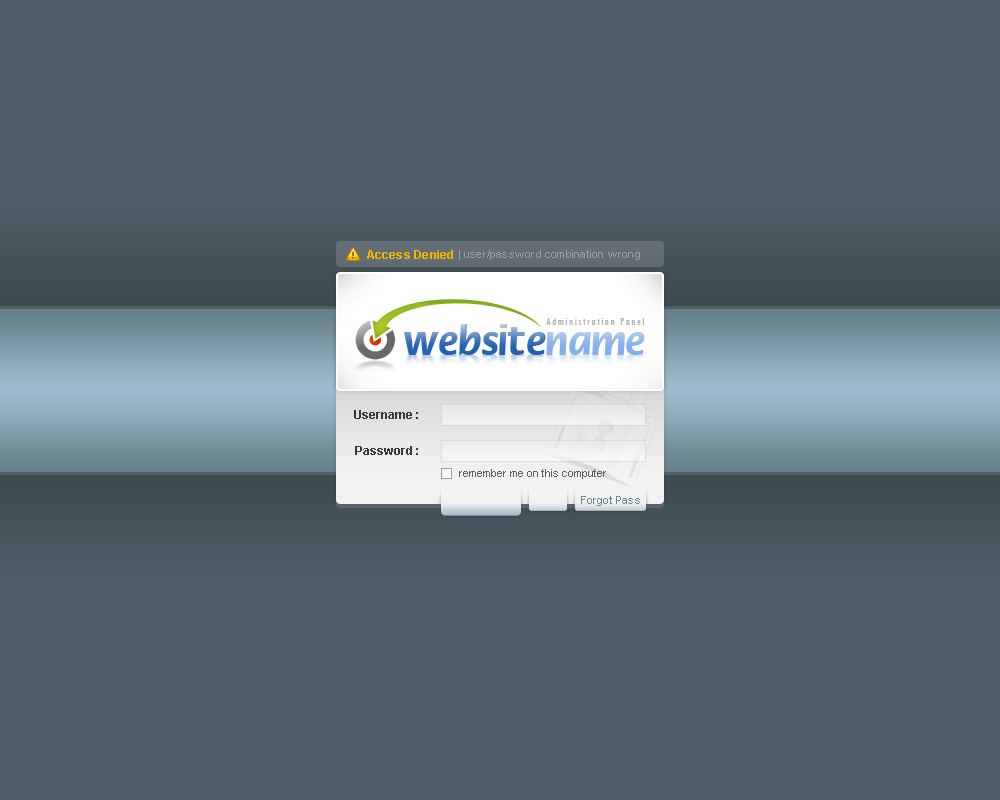
<style>
.page{position:relative;width:1000px;height:800px;background:#4f5e67}
.page>*{position:absolute;margin:0}
.t1{font:12px "Arial-BoldMT";letter-spacing:0.02em;color:#f1b500}
.t2{font:11px "ArialMT";letter-spacing:0.02em;color:#96a3a9}
.t3{font:12px "Arial-BoldMT";color:#3a3a3a}
.t4{font:11px "ArialMT";color:#5f5f5f}
.t5{font:11px "ArialMT";letter-spacing:0.02em;color:#708592}
</style>
<div class="page">
<p class="t1" style="left:367px;top:250px;width:86px;height:9px">Access Denied</p>
<p class="t2" style="left:459px;top:250px;width:181px;height:10px">| user/password combination wrong</p>
<p class="t3" style="left:354px;top:410px;width:64px;height:9px">Username :</p>
<p class="t3" style="left:355px;top:446px;width:63px;height:9px">Password :</p>
<p class="t4" style="left:459px;top:469px;width:147px;height:10px">remember me on this computer</p>
<p class="t5" style="left:581px;top:496px;width:59px;height:10px">Forgot Pass</p>
</div>
